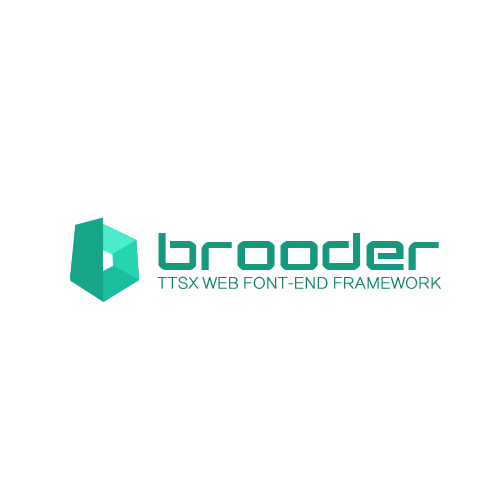
<style>
.page{position:relative;width:500px;height:500px;background:#ffffff}
.page>*{position:absolute;margin:0}
.t1{font:44.3px "StarEagle";color:#16987e;scale:1.29 1}
.t2{font:14.7px "FZLTCXHJW--GB1-0";color:#12836d;font-weight:bold;scale:0.95 1}
</style>
<div class="page">
<p class="t1" style="left:158px;top:233px;width:281px;height:37px">brooder</p>
<p class="t2" style="left:157px;top:276px;width:284px;height:13px">TTSX WEB FONT-END FRAMEWORK</p>
</div>
